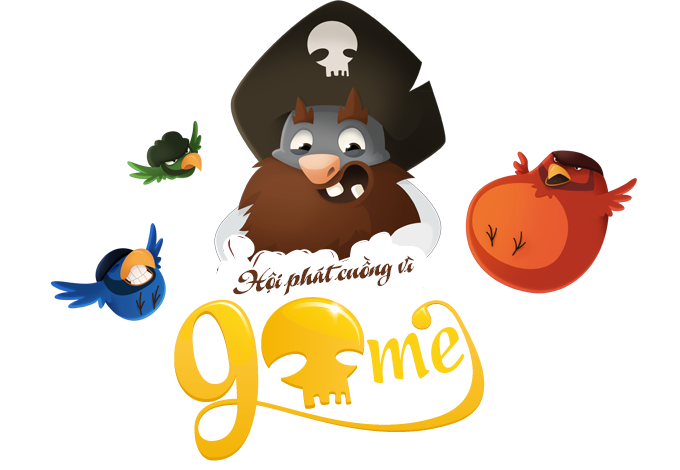
<style>
.page{position:relative;width:680px;height:470px;background:#ffffff}
.page>*{position:absolute;margin:0}
.t1{font:30px "UTM-A&S-Graceland";color:#663319}
.t2{font:110px "UVNBayBuomHepBold";color:#fcd113}
</style>
<div class="page">
<p class="t1" style="left:233px;top:255px;width:182px;height:41px;rotate:-7deg">Hội phát cuồng vì</p>
<p class="t2" style="left:366px;top:327px;width:99px;height:57px;rotate:-10deg">me</p>
</div>
